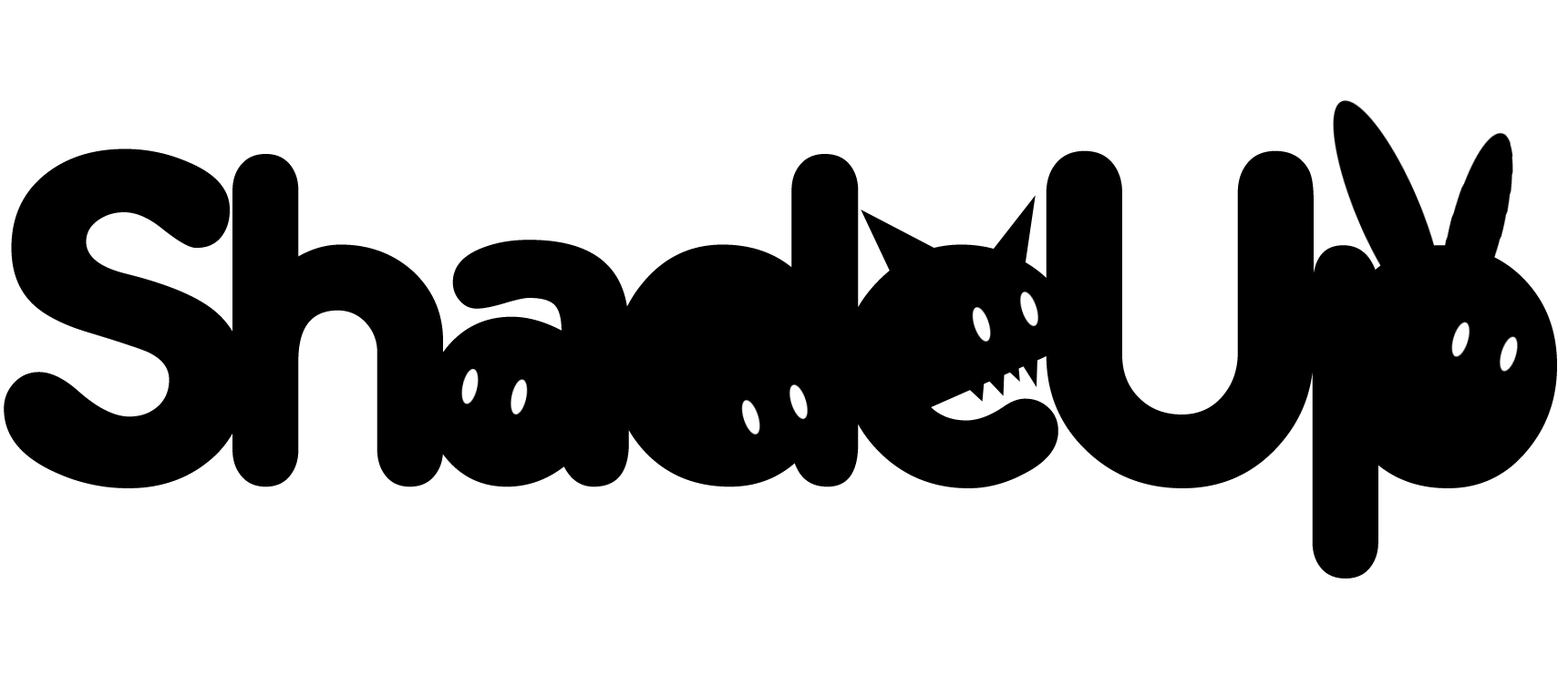
<style>
.page{position:relative;width:1568px;height:696px;background:#ffffff}
.page>*{position:absolute;margin:0}
.t1{font:493.8px "Zitti";letter-spacing:-0.115em;color:#000000}
</style>
<div class="page">
<p class="t1" style="left:4px;top:149px;width:1553px;height:430px">ShadeUp</p>
</div>
